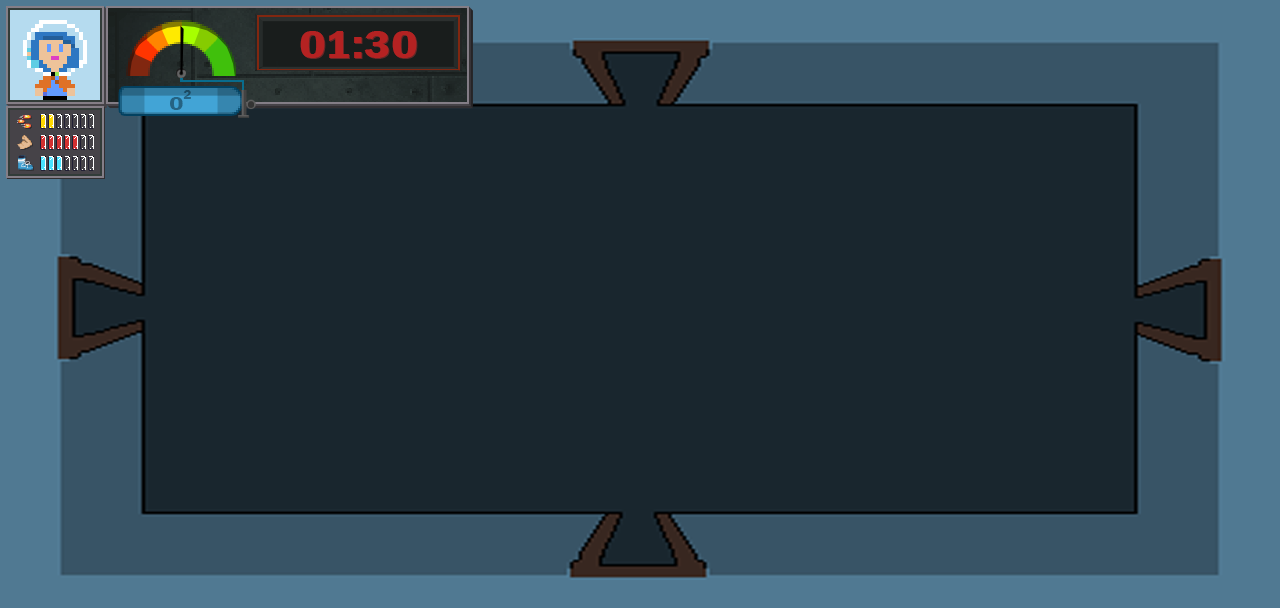
<style>
.page{position:relative;width:1280px;height:608px;background:#19262e}
.page>*{position:absolute;margin:0}
.t1{font:41.2px "FranklinGothic-DemiCond";color:#b42222;scale:1.28 1}
.t2{font:20.1px "FranklinGothic-DemiCond";color:#256383;scale:1.28 1}
.t3{font:12.8px "FranklinGothic-DemiCond";color:#256383;scale:1.28 1}
</style>
<div class="page">
<p class="t1" style="left:300px;top:31px;width:117px;height:27px">01:30</p>
<p class="t2" style="left:170px;top:90px;width:21px;height:20px">O<span class="t3">2</span></p>
</div>
